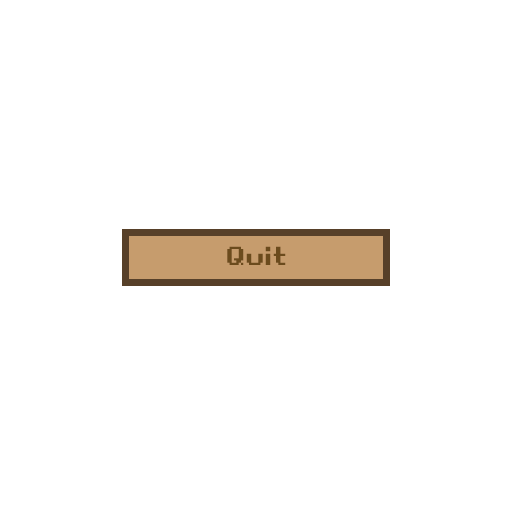
<style>
.page{position:relative;width:512px;height:512px;background:#ffffff}
.page>*{position:absolute;margin:0}
.t1{font:25px "RetroGaming";color:#6b4b1d}
</style>
<div class="page">
<p class="t1" style="left:227px;top:246px;width:59px;height:19px">Quit</p>
</div>
